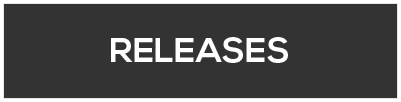
<style>
.page{position:relative;width:401px;height:102px;background:#333333}
.page>*{position:absolute;margin:0}
.t1{font:34px "NexaBold";color:#ffffff}
</style>
<div class="page">
<p class="t1" style="left:111px;top:37px;width:177px;height:26px">RELEASES</p>
</div>
